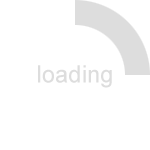
<style>
.page{position:relative;width:150px;height:150px;background:#ffffff}
.page>*{position:absolute;margin:0}
.t1{font:24px "ArialMT";color:#dddddd}
</style>
<div class="page">
<p class="t1" style="left:38px;top:65px;width:74px;height:23px">loading</p>
</div>
